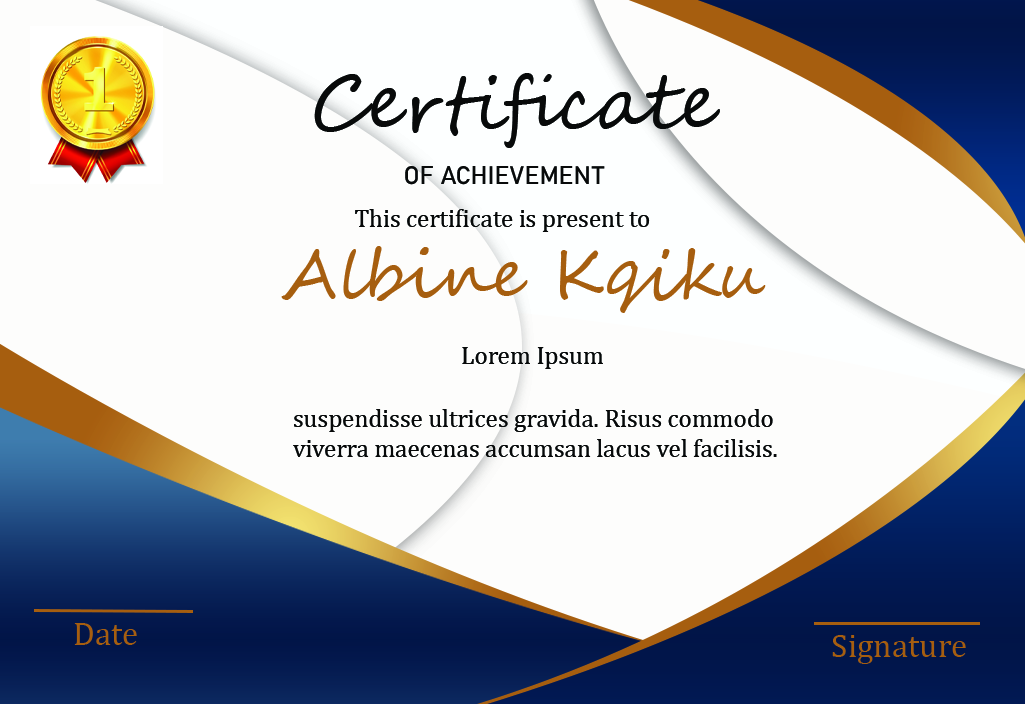
<style>
.page{position:relative;width:1025px;height:704px;background:#fdfdfc}
.page>*{position:absolute;margin:0}
.t1{font:75px "SegoeScript";color:#080a0a}
.t2{font:25px "Bahnschrift";color:#080a0a}
.t3{font:25px "CambriaMath";color:#060808}
.t4{font:66.7px "SegoeScript";color:#a65e0f}
.t5{font:25px "CambriaMath";color:#070909}
.t6{font:33.3px "CambriaMath";color:#a65e0f}
</style>
<div class="page">
<p class="t1" style="left:314px;top:73px;width:406px;height:75px">Certificate</p>
<p class="t2" style="left:405px;top:166px;width:200px;height:19px">OF ACHIEVEMENT</p>
<p class="t3" style="left:355px;top:209px;width:295px;height:23px">This certificate is present to</p>
<p class="t4" style="left:281px;top:246px;width:485px;height:67px">Albine Kqiku</p>
<p class="t5" style="left:462px;top:347px;width:141px;height:22px">Lorem Ipsum</p>
<p class="t5" style="left:293px;top:409px;width:484px;height:48px">suspendisse ultrices gravida. Risus commodo viverra maecenas accumsan lacus vel facilisis.</p>
<p class="t6" style="left:74px;top:623px;width:63px;height:22px">Date</p>
<p class="t6" style="left:832px;top:635px;width:134px;height:29px">Signature</p>
</div>
